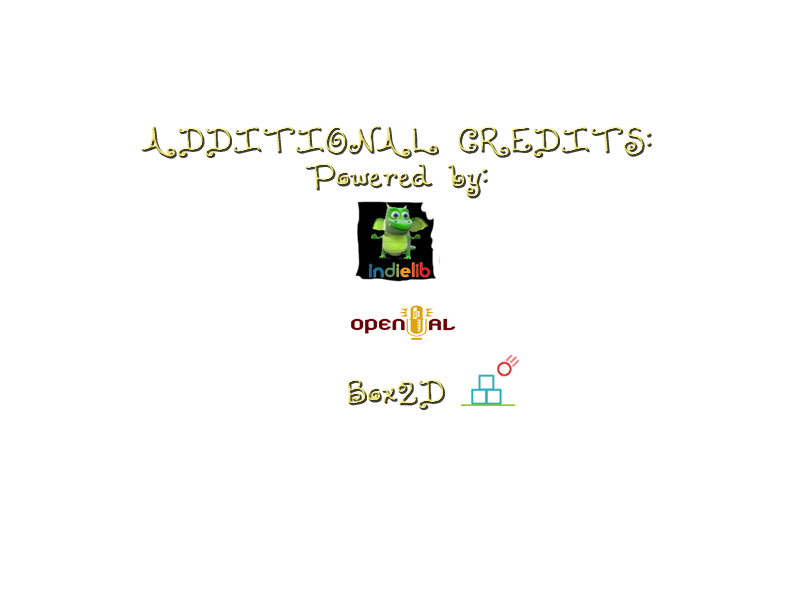
<style>
.page{position:relative;width:800px;height:600px;background:#ffffff}
.page>*{position:absolute;margin:0}
.t1{font:30px "Lollipop"}
</style>
<div class="page">
<p class="t1" style="left:141px;top:125px;width:510px;height:284px;text-align:center">ADDITIONAL CREDITS:<br>Powered by:<br><br><br><br><br><br>Box2D</p>
</div>
